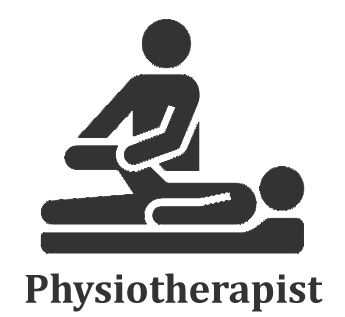
<style>
.page{position:relative;width:345px;height:317px;background:#ffffff}
.page>*{position:absolute;margin:0}
.t1{font:41.8px "Cambria-Bold";color:#333333}
</style>
<div class="page">
<p class="t1" style="left:25px;top:273px;width:298px;height:39px">Physiotherapist</p>
</div>
